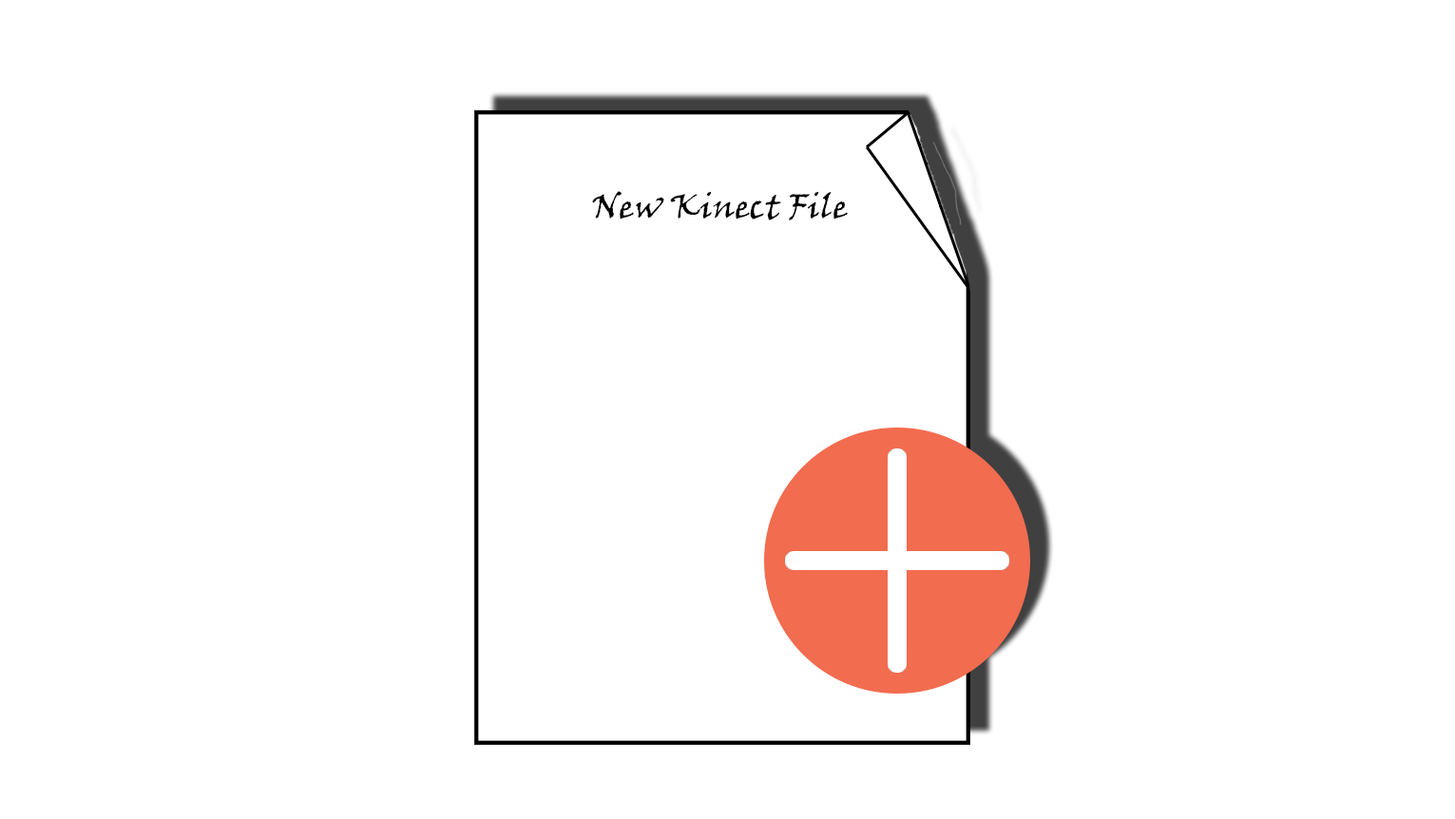
<style>
.page{position:relative;width:1455px;height:819px;background:#ffffff}
.page>*{position:absolute;margin:0}
.t1{font:34.2px "VinerHandITC";color:#000000}
</style>
<div class="page">
<p class="t1" style="left:592px;top:191px;width:256px;height:30px">New Kinect File</p>
</div>
